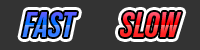
<style>
.page{position:relative;width:200px;height:50px;background:#333333}
.page>*{position:absolute;margin:0}
.t1{font:35px "BebasNeuePro-BoldItalic"}
</style>
<div class="page">
<p class="t1" style="left:22px;top:12px;width:55px;height:25px">FAST</p>
<p class="t1" style="left:120px;top:12px;width:62px;height:25px">SLOW</p>
</div>
